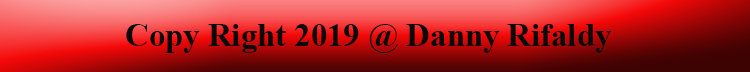
<style>
.page{position:relative;width:750px;height:72px}
.page>*{position:absolute;margin:0}
.t1{font:32.7px "TimesNewRomanPS-BoldMT";color:#0a0a0a}
</style>
<div class="page">
<p class="t1" style="left:126px;top:24px;width:486px;height:29px">Copy Right 2019 @ Danny Rifaldy</p>
</div>
